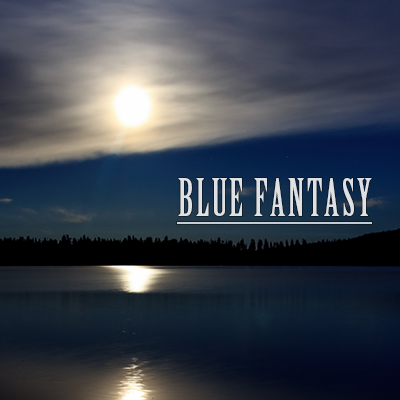
<style>
.page{position:relative;width:400px;height:400px}
.page>*{position:absolute;margin:0}
.t1{font:50.6px "BirchStd";letter-spacing:0.05em;color:#dee0e3;scale:0.91 1}
</style>
<div class="page">
<p class="t1" style="left:178px;top:178px;width:194px;height:38px">BLUE FANTASY</p>
</div>
